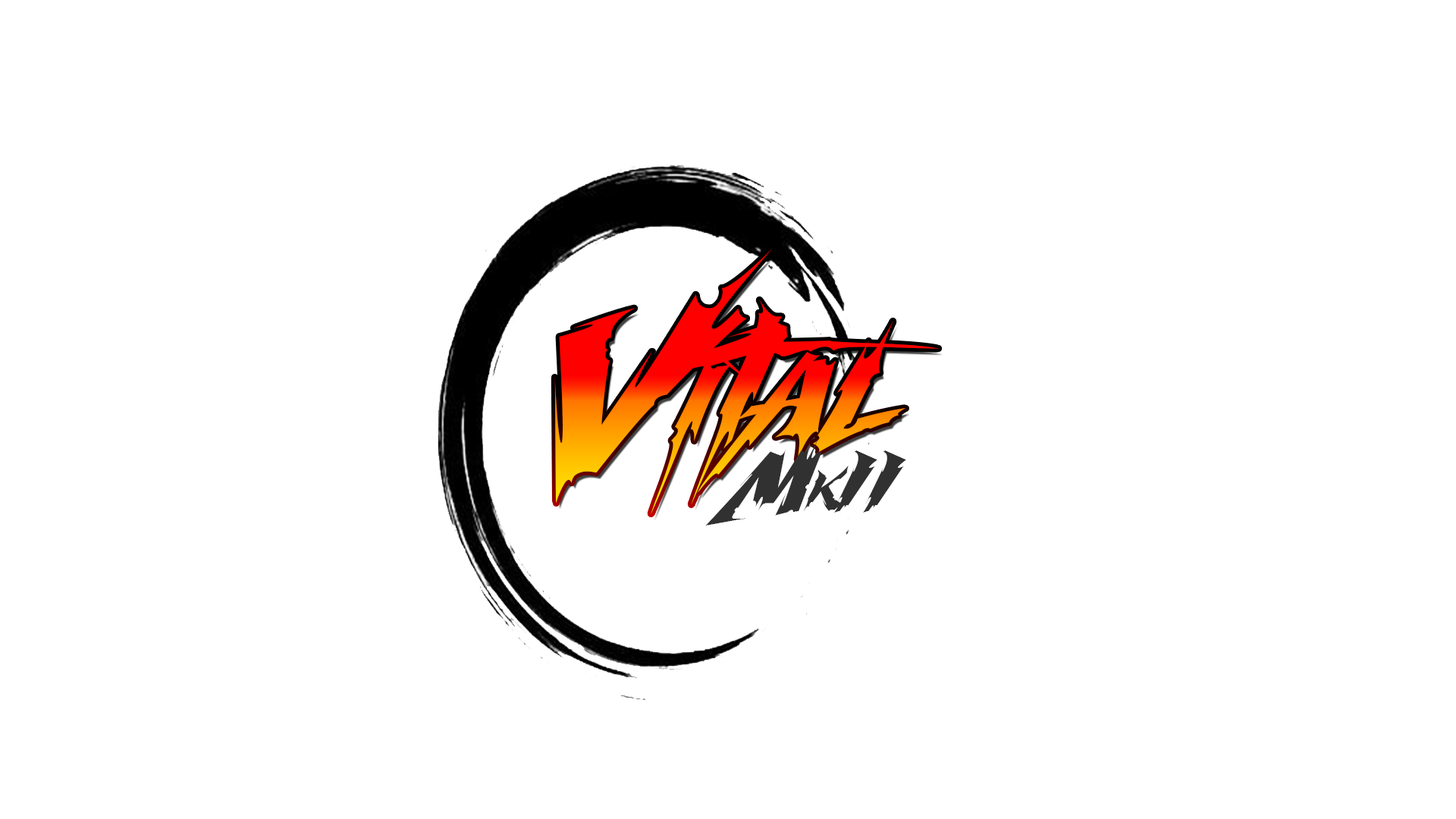
<style>
.page{position:relative;width:1456px;height:819px;background:#ffffff}
.page>*{position:absolute;margin:0}
.t1{font:183px "MartyricPersonalUseOnly"}
.t2{font:71.4px "MartyricPersonalUseOnly";color:#313131}
</style>
<div class="page">
<p class="t1" style="left:554px;top:249px;width:385px;height:265px">Vital</p>
<p class="t2" style="left:705px;top:437px;width:201px;height:89px">MkII</p>
</div>
